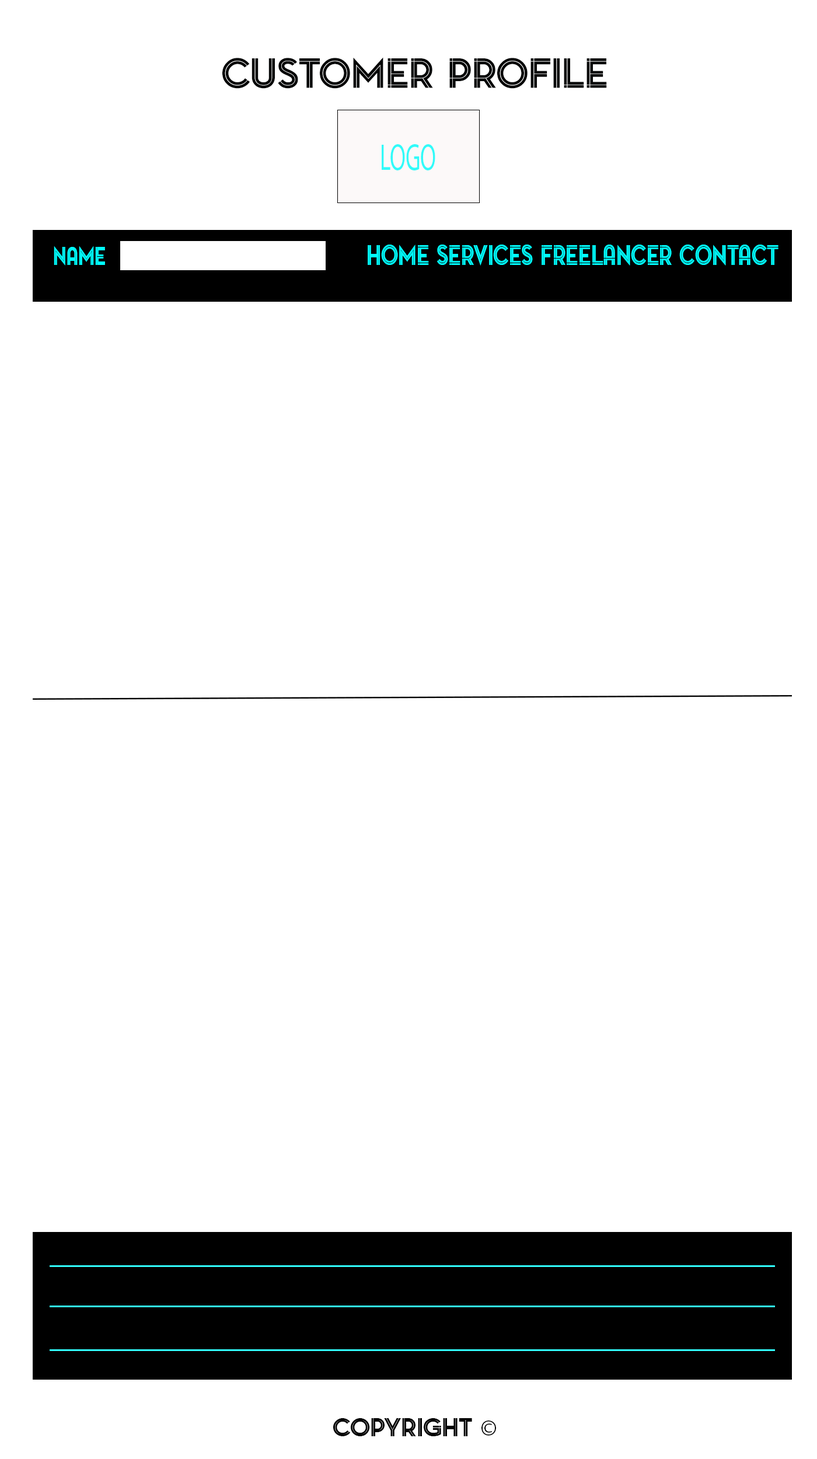
<style>
.page{position:relative;width:817px;height:1459px;background:#ffffff}
.page>*{position:absolute;margin:0}
.t1{font:39.4px "PontiacInlineRegular";color:#030404}
.t2{font:37.6px "MyriadPro-Regular";color:#31fbfa;scale:0.61 1}
.t3{font:26.1px "PontiacInlineRegular";color:#00ffff;scale:0.81 1}
.t4{font:24.6px "PontiacInlineRegular";color:#00ffff;scale:0.77 1}
.t5{font:24.3px "PontiacInlineRegular";color:#000000}
.t6{font:24.3px "MyriadPro-Regular";color:#000000}
</style>
<div class="page">
<p class="t1" style="left:222px;top:57px;width:385px;height:32px">Customer Profile</p>
<p class="t2" style="left:382px;top:144px;width:53px;height:26px">LOGO</p>
<p class="t3" style="left:368px;top:245px;width:411px;height:21px">HOME SERVICES FREELANCER CONTACT</p>
<p class="t4" style="left:54px;top:246px;width:51px;height:20px">NAME</p>
<p class="t5" style="left:333px;top:1418px;width:163px;height:18px">COPYRIGHT <span class="t6">©</span></p>
</div>
